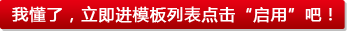
<style>
.page{position:relative;width:347px;height:31px}
.page>*{position:absolute;margin:0}
.t1{font:16px "MicrosoftYaHei";letter-spacing:0.05em;color:#ffffff;font-weight:bold}
</style>
<div class="page">
<p class="t1" style="left:12px;top:6px;width:320px;height:17px">我懂了，立即进模板列表点击“启用”吧！</p>
</div>
